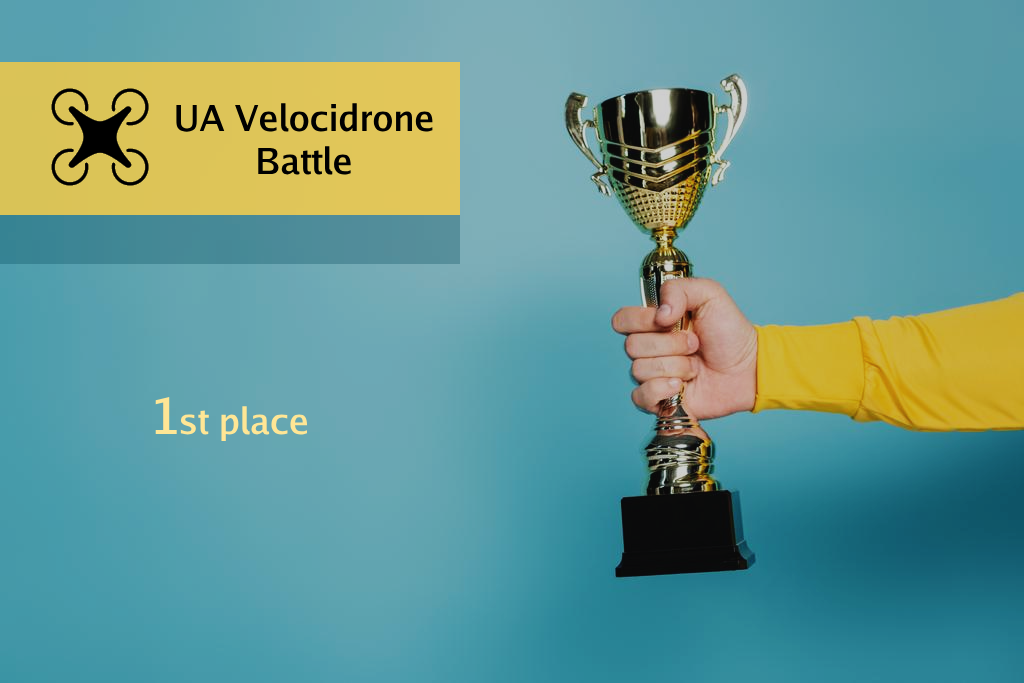
<style>
.page{position:relative;width:1024px;height:683px}
.page>*{position:absolute;margin:0}
.t1{font:36px "GoMedium";color:#000000}
.t2{font:36px "GoMedium";color:#ffe695}
.t3{font:50px "GoMedium";color:#ffe695}
</style>
<div class="page">
<p class="t1" style="left:176px;top:103px;width:257px;height:72px;text-align:center">UA Velocidrone<br>Battle</p>
<p class="t2" style="left:155px;top:396px;width:153px;height:45px"><span class="t3">1</span>st place</p>
</div>
